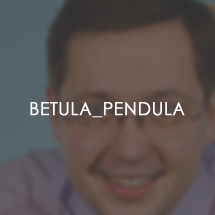
<style>
.page{position:relative;width:215px;height:215px}
.page>*{position:absolute;margin:0}
.t1{font:18px "CenturyGothic";color:#ffffff;font-weight:bold}
</style>
<div class="page">
<p class="t1" style="left:30px;top:102px;width:155px;height:16px">BETULA_PENDULA</p>
</div>
